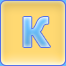
<style>
.page{position:relative;width:66px;height:66px}
.page>*{position:absolute;margin:0}
.t1{font:41px "Tahoma-Bold"}
</style>
<div class="page">
<p class="t1" style="left:23px;top:17px;width:27px;height:30px">К</p>
<p class="t1" style="left:23px;top:17px;width:27px;height:30px">К</p>
</div>
